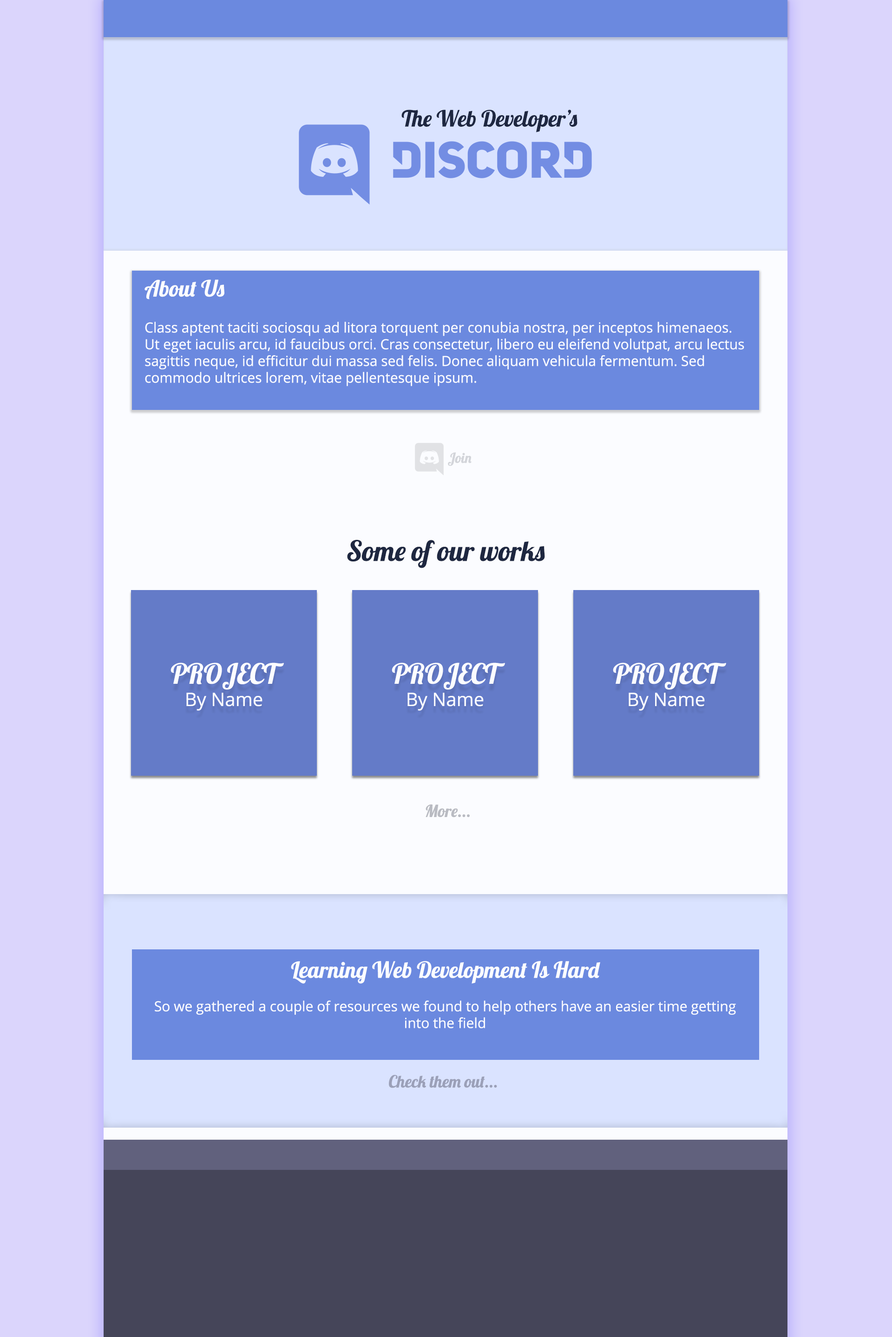
<style>
.page{position:relative;width:892px;height:1337px}
.page>*{position:absolute;margin:0}
.t1{font:22.3px "Lobster-Regular";color:#1e2740}
.t2{font:22.3px "Lobster-Regular";color:#fbfcff}
.t3{font:13.9px "OpenSans";color:#fbfcff}
.t4{font:13.9px "Lobster-Regular";color:#d3d5da}
.t5{font:27.9px "Lobster-Regular";color:#1e2740}
.t6{font:27.9px "Lobster-Regular";color:#fbfcff}
.t7{font:18.6px "OpenSans";color:#fbfcff}
.t8{font:16.7px "Lobster-Regular";color:#b9bbc2}
.t9{font:16.7px "Lobster-Regular";color:#9ba0b8}
</style>
<div class="page">
<p class="t1" style="left:401px;top:110px;width:176px;height:22px">The Web Developer’s</p>
<p class="t2" style="left:144px;top:280px;width:80px;height:20px">About Us</p>
<p class="t3" style="left:145px;top:322px;width:599px;height:64px">Class aptent taciti sociosqu ad litora torquent per conubia nostra, per inceptos himenaeos. Ut eget iaculis arcu, id faucibus orci. Cras consectetur, libero eu eleifend volutpat, arcu lectus sagittis neque, id efficitur dui massa sed felis. Donec aliquam vehicula fermentum. Sed commodo ultrices lorem, vitae pellentesque ipsum.</p>
<p class="t4" style="left:448px;top:452px;width:23px;height:14px">Join</p>
<p class="t5" style="left:347px;top:540px;width:198px;height:28px">Some of our works</p>
<p class="t6" style="left:170px;top:663px;width:114px;height:48px;text-align:center">PROJECT<br><span class="t7">By Name</span></p>
<p class="t6" style="left:391px;top:663px;width:114px;height:48px;text-align:center">PROJECT<br><span class="t7">By Name</span></p>
<p class="t6" style="left:613px;top:663px;width:113px;height:48px;text-align:center">PROJECT<br><span class="t7">By Name</span></p>
<p class="t8" style="left:425px;top:804px;width:44px;height:14px">More...</p>
<p class="t3" style="left:155px;top:961px;width:581px;height:68px;text-align:center"><span class="t2">Learning Web Development Is Hard<br></span><br>So we gathered a couple of resources we found to help others have an easier time getting into the field</p>
<p class="t9" style="left:389px;top:1075px;width:108px;height:13px">Check them out...</p>
</div>
